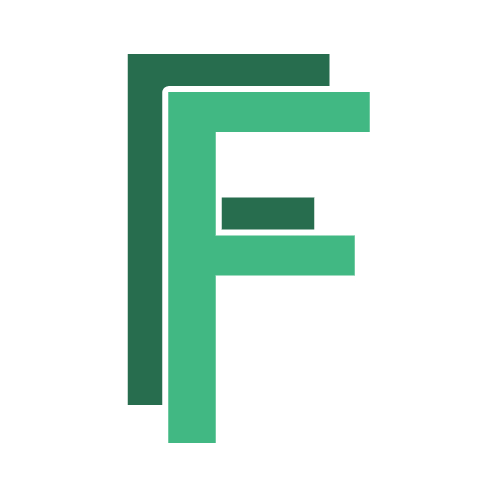
<style>
.page{position:relative;width:500px;height:500px;background:#ffffff}
.page>*{position:absolute;margin:0}
.t1{font:481.4px "DejaVuSans";color:#276d4e}
.t2{font:481.4px "DejaVuSans";color:#41b883}
</style>
<div class="page">
<p class="t1" style="left:127px;top:54px;width:203px;height:351px">F</p>
<p class="t2" style="left:168px;top:92px;width:202px;height:351px">F</p>
</div>
